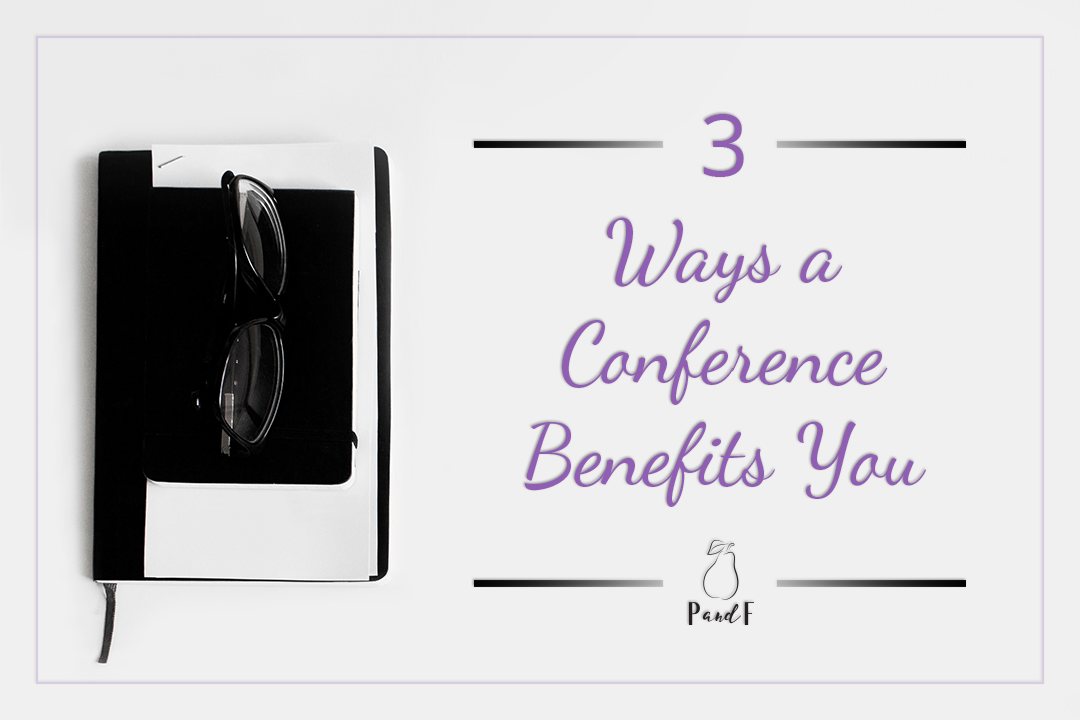
<style>
.page{position:relative;width:1080px;height:720px;background:#f0f0f0}
.page>*{position:absolute;margin:0}
.t1{font:85px "OpenSans";color:#905fb3}
.t2{font:85px "DancingScriptOT";color:#905fb3}
</style>
<div class="page">
<p class="t1" style="left:703px;top:114px;width:41px;height:63px">3</p>
<p class="t2" style="left:524px;top:217px;width:402px;height:290px;text-align:center">Ways a Conference Benefits You</p>
</div>
